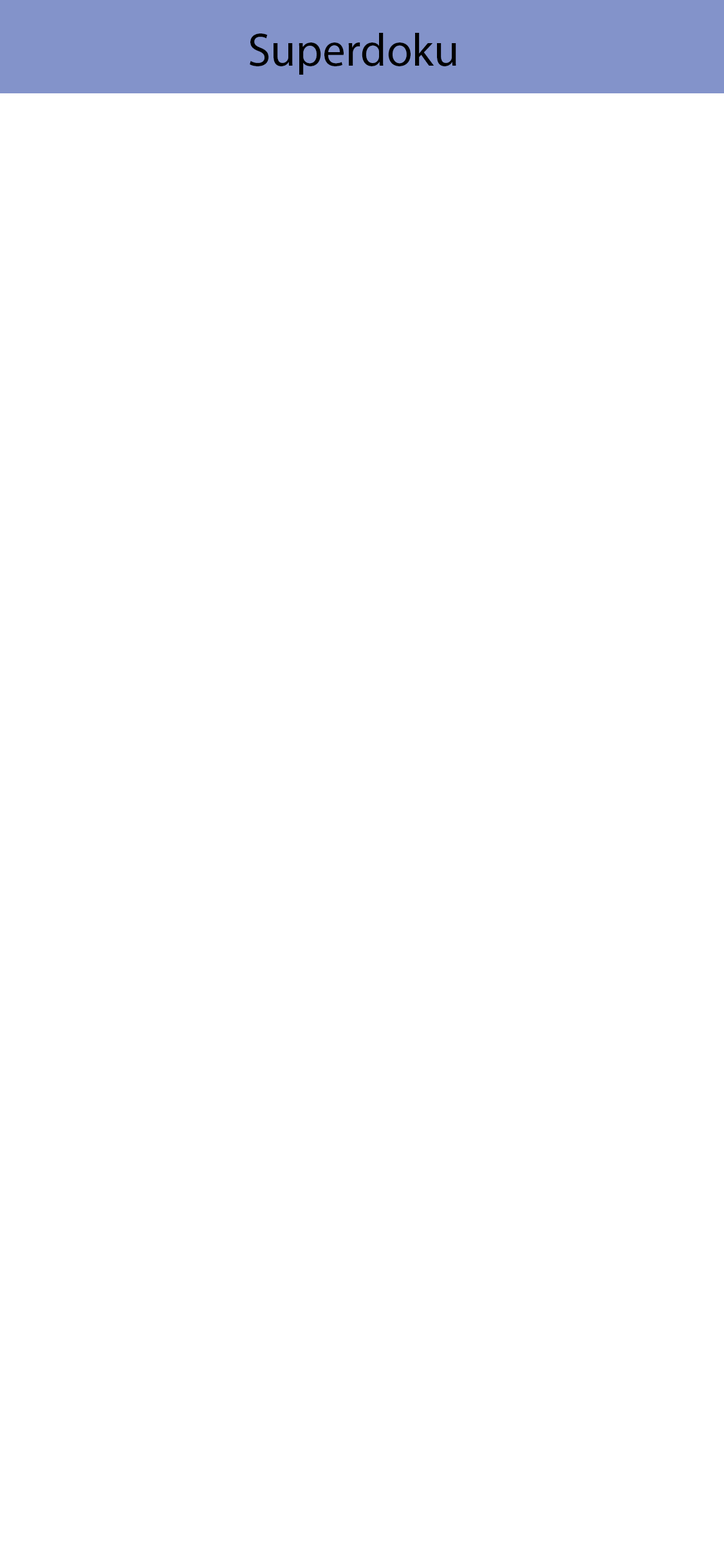
<style>
.page{position:relative;width:724px;height:1568px;background:#ffffff}
.page>*{position:absolute;margin:0}
.t1{font:46.3px "MyriadPro-Regular";color:#000000}
</style>
<div class="page">
<p class="t1" style="left:250px;top:33px;width:206px;height:42px">Superdoku</p>
</div>
